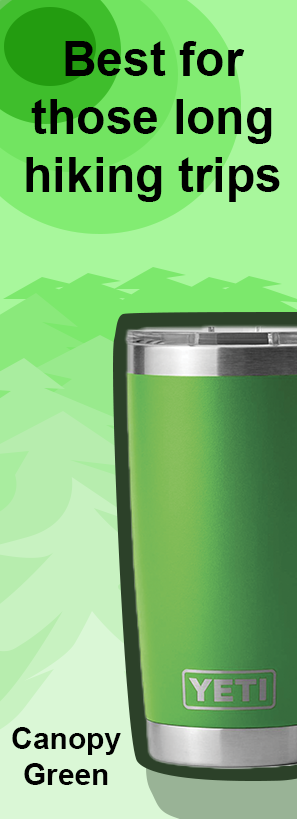
<style>
.page{position:relative;width:297px;height:819px}
.page>*{position:absolute;margin:0}
.t1{font:48px "Arial-BoldMT";color:#000000}
.t2{font:30px "Arial-BoldMT";color:#000000}
</style>
<div class="page">
<p class="t1" style="left:26px;top:41px;width:254px;height:161px;text-align:center">Best for those long hiking trips</p>
<p class="t2" style="left:12px;top:727px;width:109px;height:58px;text-align:center">Canopy Green</p>
</div>
